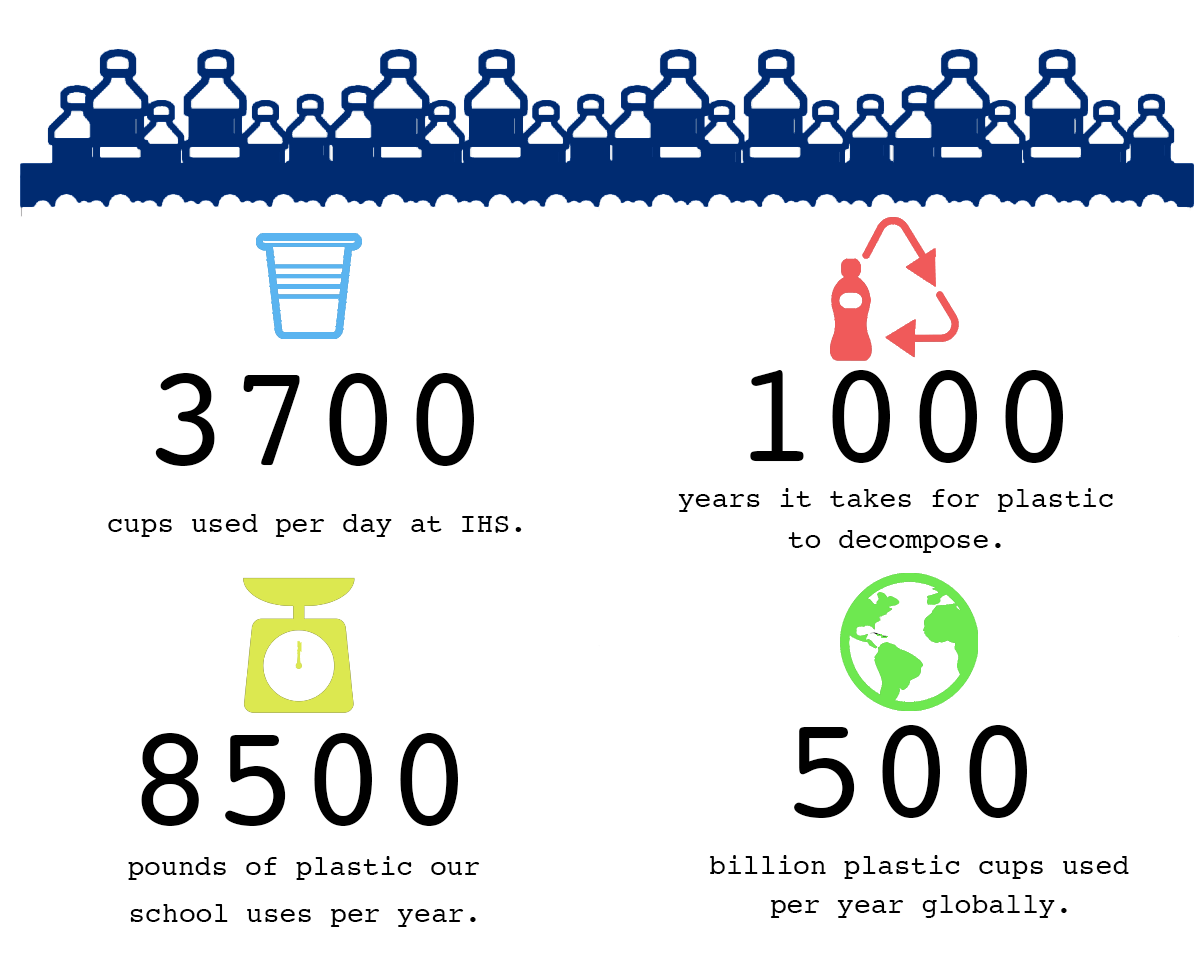
<style>
.page{position:relative;width:1202px;height:978px;background:#ffffff}
.page>*{position:absolute;margin:0}
.t1{font:144px "Courier";color:#000000}
.t2{font:28px "Courier";color:#000000}
</style>
<div class="page">
<p class="t1" style="left:155px;top:373px;width:319px;height:93px">3700</p>
<p class="t1" style="left:750px;top:370px;width:313px;height:93px">1000</p>
<p class="t2" style="left:678px;top:488px;width:435px;height:24px">years it takes for plastic</p>
<p class="t2" style="left:108px;top:514px;width:414px;height:23px">cups used per day at IHS.</p>
<p class="t2" style="left:788px;top:530px;width:213px;height:23px">to decompose.</p>
<p class="t1" style="left:794px;top:725px;width:233px;height:93px">500</p>
<p class="t1" style="left:141px;top:733px;width:317px;height:93px">8500</p>
<p class="t2" style="left:128px;top:856px;width:352px;height:24px">pounds of plastic our</p>
<p class="t2" style="left:709px;top:855px;width:420px;height:24px">billion plastic cups used</p>
<p class="t2" style="left:130px;top:904px;width:346px;height:23px">school uses per year.</p>
<p class="t2" style="left:770px;top:895px;width:297px;height:23px">per year globally.</p>
</div>
